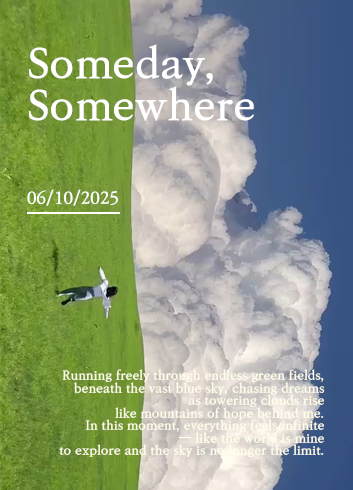
<style>
.page{position:relative;width:353px;height:490px}
.page>*{position:absolute;margin:0}
.t1{font:41.7px/41.7px "KoPubBatangBold";color:#ffffff}
.t2{font:16.7px "KoPubBatangBold";color:#ffffff}
.t3{font:12.5px/12.5px "KoPubBatangBold";color:#fffeeb}
.t4{font:12.5px/12.5px "Gulim";color:#fffeeb}
</style>
<div class="page">
<p class="t1" style="left:29px;top:44px;width:225px;height:77px">Someday,<br>Somewhere</p>
<p class="t2" style="left:27px;top:189px;width:91px;height:17px">06/10/2025</p>
<p class="t3" style="left:59px;top:369px;width:266px;height:88px;text-align:right">Running freely through endless green fields,<br>beneath the vast blue sky, chasing dreams<br>as towering clouds rise<br>like mountains of hope behind me.<br>In this moment, everything feels infinite<br><span class="t4">—</span> like the world is mine<br>to explore and the sky is no longer the limit.</p>
</div>
